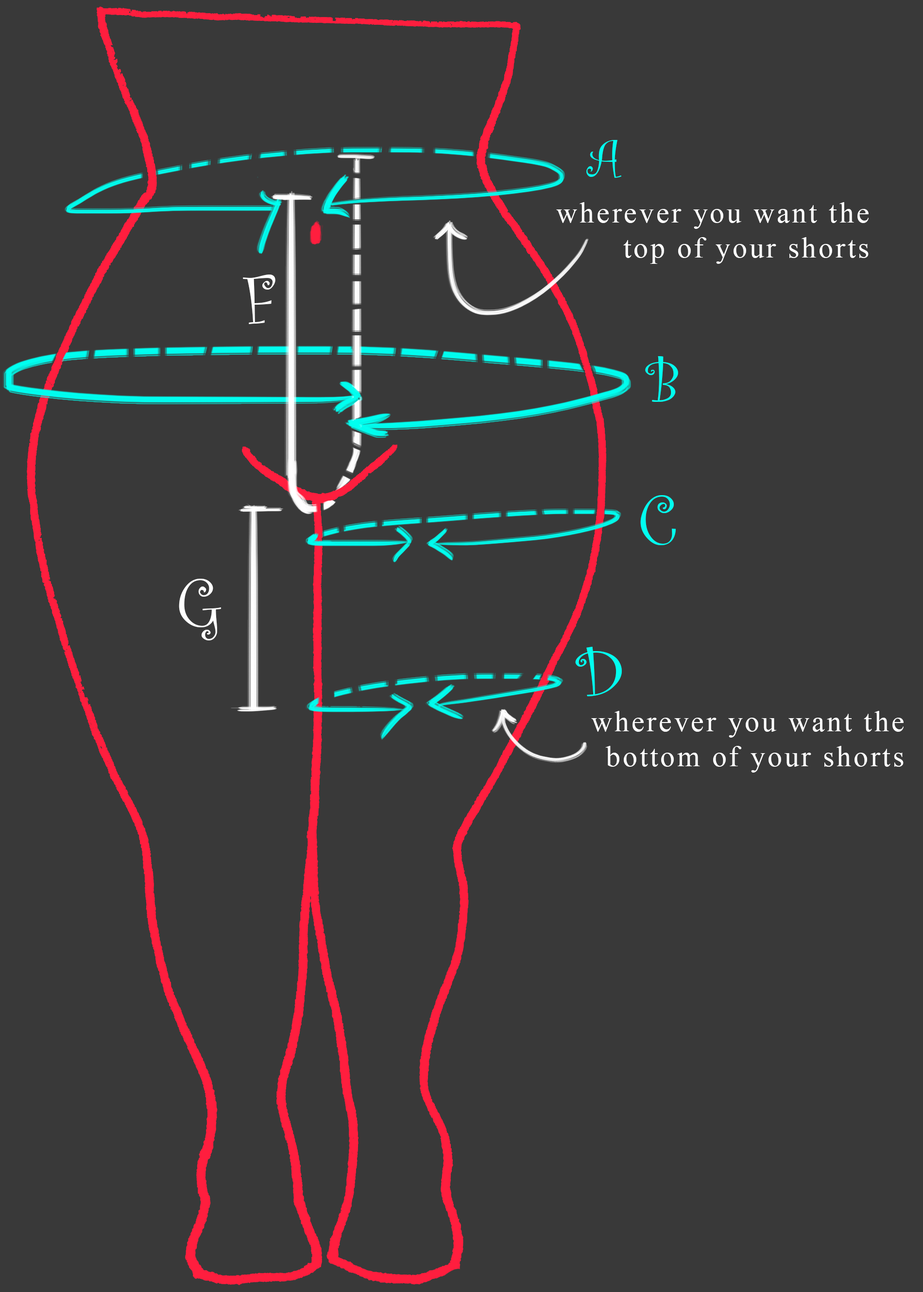
<style>
.page{position:relative;width:923px;height:1292px;background:#393939}
.page>*{position:absolute;margin:0}
.t1{font:54.4px "CurlzMT";letter-spacing:0.08em;color:#00fff0}
.t2{font:29.1px "TimesNewRomanPSMT";letter-spacing:0.08em;color:#ffffff}
.t3{font:72.9px "CurlzMT";letter-spacing:0.08em;color:#ffffff}
.t4{font:62.7px "CurlzMT";letter-spacing:0.08em;color:#00fff0}
.t5{font:72.9px "CurlzMT";letter-spacing:0.08em;color:#00fff0}
</style>
<div class="page">
<p class="t1" style="left:586px;top:140px;width:35px;height:38px">A</p>
<p class="t2" style="left:556px;top:202px;width:313px;height:62px;text-align:right">wherever you want the top of your shorts</p>
<p class="t3" style="left:243px;top:274px;width:32px;height:50px">F</p>
<p class="t4" style="left:645px;top:356px;width:33px;height:46px">B</p>
<p class="t5" style="left:640px;top:495px;width:36px;height:50px">C</p>
<p class="t3" style="left:179px;top:579px;width:42px;height:61px">G</p>
<p class="t5" style="left:575px;top:647px;width:47px;height:49px">D</p>
<p class="t2" style="left:591px;top:711px;width:313px;height:61px;text-align:right">wherever you want the bottom of your shorts</p>
</div>
